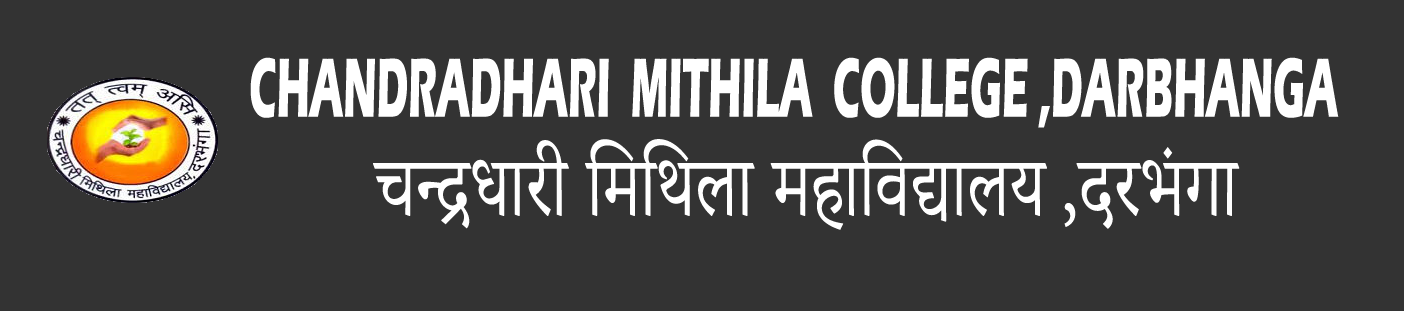
<style>
.page{position:relative;width:1404px;height:311px;background:#333333}
.page>*{position:absolute;margin:0}
.t1{font:86.6px "ErasITC-Bold";color:#ffffff;scale:0.47 1}
.t2{font:104.8px "AdobeDevanagari-Regular";color:#ffffff;scale:0.76 1}
</style>
<div class="page">
<p class="t1" style="left:250px;top:57px;width:1089px;height:71px">CHANDRADHARI  MITHILA  COLLEGE ,DARBHANGA</p>
<p class="t2" style="left:373px;top:139px;width:867px;height:91px">चन्द्रधारी मिथिला महाविद्यालय ,दरभंगा</p>
</div>
